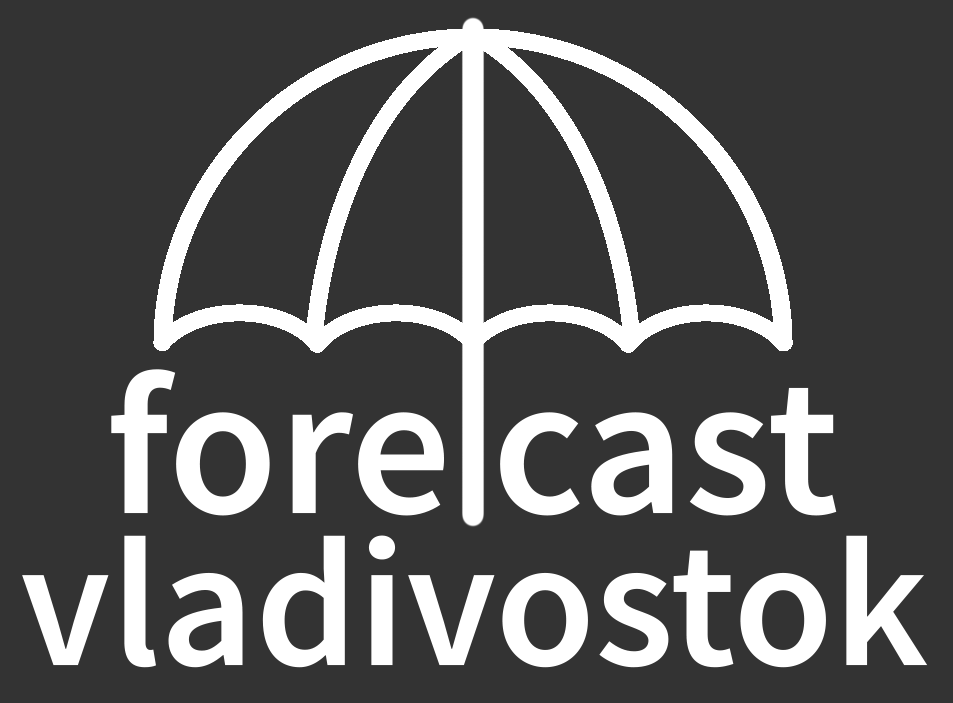
<style>
.page{position:relative;width:953px;height:703px;background:#333333}
.page>*{position:absolute;margin:0}
.t1{font:200px "SourceSansRoman-Semibold";color:#ffffff}
.t2{font:182.9px "SourceSansRoman-Semibold";color:#ffffff}
</style>
<div class="page">
<p class="t1" style="left:111px;top:369px;width:726px;height:147px">fore cast</p>
<p class="t2" style="left:22px;top:535px;width:906px;height:133px">vladivostok</p>
</div>
